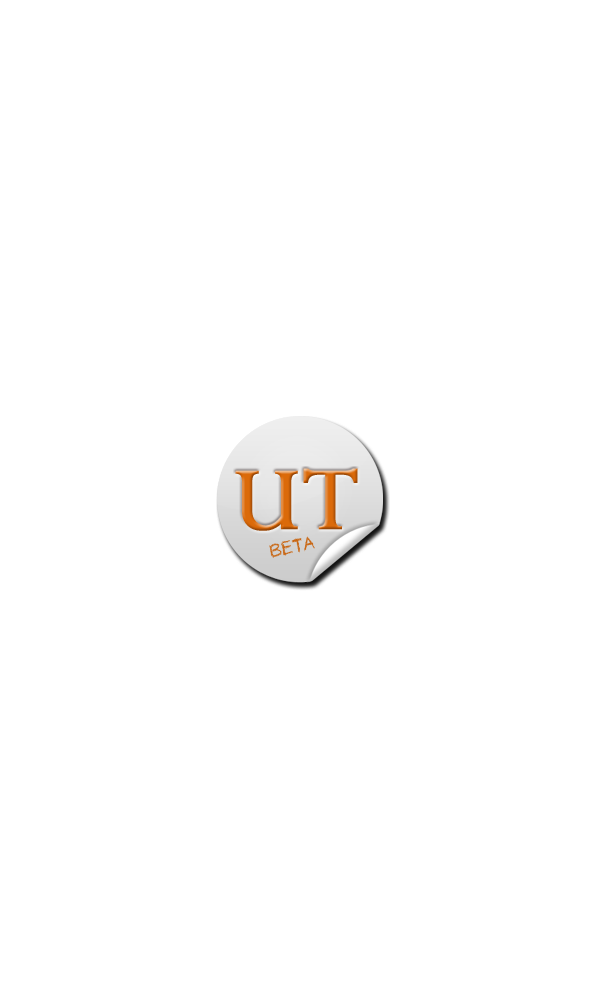
<style>
.page{position:relative;width:600px;height:1000px;background:#ffffff}
.page>*{position:absolute;margin:0}
.t1{font:100px "Perpetua";font-weight:bold}
.t2{font:20px "pastel";color:#c96816}
</style>
<div class="page">
<p class="t1" style="left:235px;top:468px;width:123px;height:63px">UT</p>
<p class="t2" style="left:269px;top:536px;width:46px;height:22px;rotate:-12deg">BETA</p>
</div>
